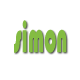
<style>
.page{position:relative;width:80px;height:80px;background:#ffffff}
.page>*{position:absolute;margin:0}
.t1{font:45.3px "Bauhaus93";color:#84bc42;scale:0.47 1}
</style>
<div class="page">
<p class="t1" style="left:14px;top:20px;width:53px;height:33px">simon</p>
</div>
